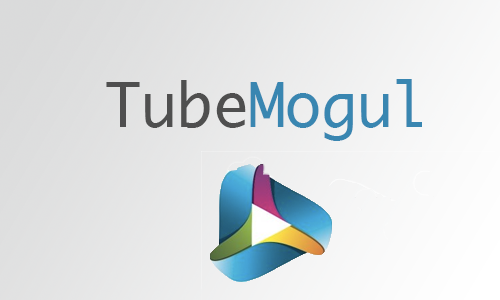
<style>
.page{position:relative;width:500px;height:300px}
.page>*{position:absolute;margin:0}
.t1{font:60px "Ayuthaya";color:#4f4f4f}
.t2{font:60px "Ayuthaya";color:#3986b1}
</style>
<div class="page">
<p class="t1" style="left:106px;top:80px;width:140px;height:48px">Tube</p>
<p class="t2" style="left:250px;top:79px;width:172px;height:62px">Mogul</p>
</div>
